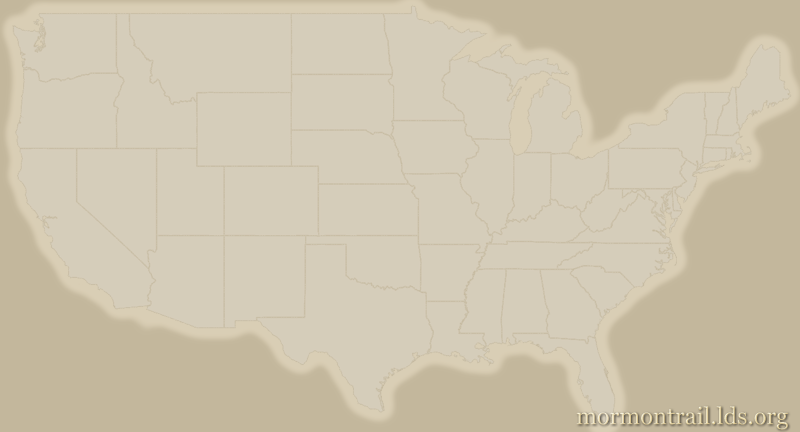
<style>
.page{position:relative;width:800px;height:432px;background:#d5cdba}
.page>*{position:absolute;margin:0}
.t1{font:23.7px "Georgia"}
</style>
<div class="page">
<p class="t1" style="left:576px;top:406px;width:212px;height:24px">mormontrail.lds.org</p>
</div>
